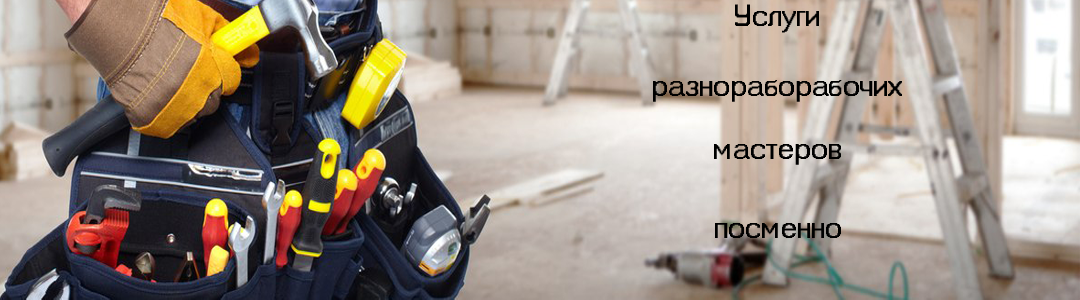
<style>
.page{position:relative;width:1080px;height:300px}
.page>*{position:absolute;margin:0}
.t1{font:30px "MS Sans Serif";color:#000000}
</style>
<div class="page">
<p class="t1" style="left:735px;top:4px;width:84px;height:29px">Услуги</p>
<p class="t1" style="left:653px;top:80px;width:249px;height:22px">разнораборабочих</p>
<p class="t1" style="left:714px;top:144px;width:127px;height:21px">мастеров</p>
<p class="t1" style="left:715px;top:223px;width:126px;height:15px">посменно</p>
</div>
